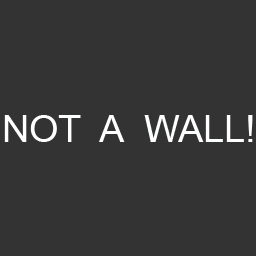
<style>
.page{position:relative;width:256px;height:256px;background:#333333}
.page>*{position:absolute;margin:0}
.t1{font:38px "ArialMT";color:#feffff}
</style>
<div class="page">
<p class="t1" style="left:4px;top:115px;width:249px;height:27px">NOT  A  WALL!</p>
</div>
